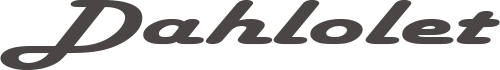
<style>
.page{position:relative;width:500px;height:70px;background:#ffffff}
.page>*{position:absolute;margin:0}
.t1{font:66px "HarlowSolid";color:#4a4646;scale:2.05 1}
</style>
<div class="page">
<p class="t1" style="left:0px;top:0px;width:500px;height:70px">Dahlolet</p>
</div>
